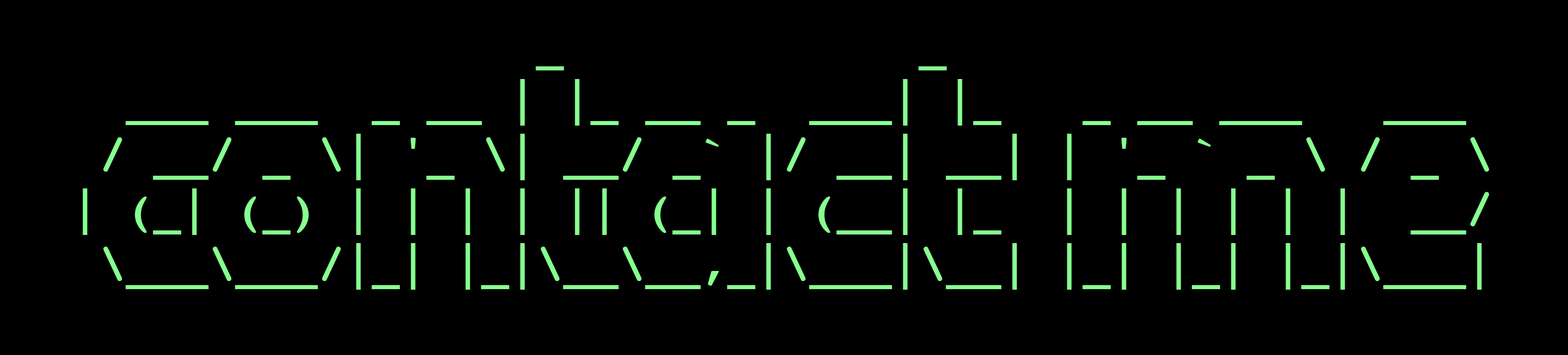
<style>
.page{position:relative;width:1568px;height:355px;background:#000000}
.page>*{position:absolute;margin:0}
.t1{font:45.6px "Courier-Bold";color:#87ff8f}
</style>
<div class="page">
<p class="t1" style="left:83px;top:66px;width:1406px;height:224px">_             _<br>  ___ ___  _ __ | |_ __ _  ___| |_   _ __ ___   ___<br> / __/ _ \| '_ \| __/ _` |/ __| __| | '_ ` _ \ / _ \<br>| (_| (_) | | | | || (_| | (__| |_  | | | | | |  __/<br> \___\___/|_| |_|\__\__,_|\___|\__| |_| |_| |_|\___|</p>
</div>
